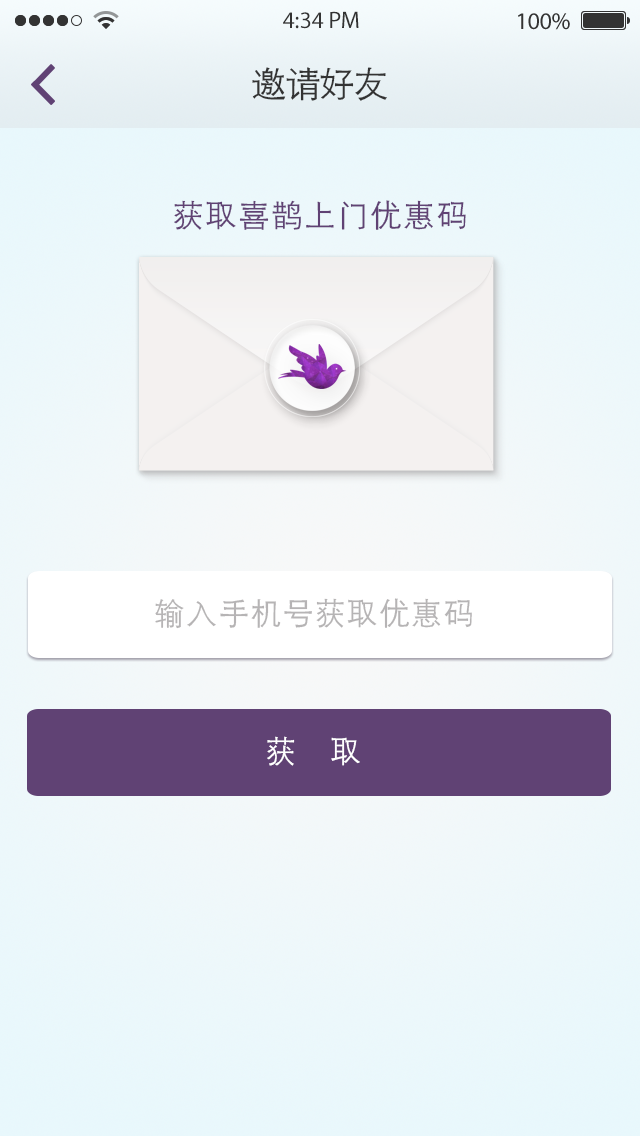
<style>
.page{position:relative;width:640px;height:1136px}
.page>*{position:absolute;margin:0}
.t1{font:24px "MyriadPro-Regular";color:#333333}
.t2{font:34px "FZZDXJW--GB1-0";color:#333333}
.t3{font:30px "FZZDXJW--GB1-0";letter-spacing:0.1em;color:#604274}
.t4{font:30px "FZZDXJW--GB1-0";letter-spacing:0.1em;color:#b6b4b5}
.t5{font:30px "FZZDXJW--GB1-0";letter-spacing:0.1em;color:#ffffff}
</style>
<div class="page">
<p class="t1" style="left:283px;top:11px;width:76px;height:18px">4:34 PM</p>
<p class="t1" style="left:518px;top:13px;width:52px;height:17px">100%</p>
<p class="t2" style="left:252px;top:67px;width:135px;height:34px">邀请好友</p>
<p class="t3" style="left:174px;top:200px;width:292px;height:30px">获取喜鹊上门优惠码</p>
<p class="t4" style="left:155px;top:598px;width:317px;height:31px">输入手机号获取优惠码</p>
<p class="t5" style="left:267px;top:736px;width:93px;height:30px">获   取</p>
</div>
